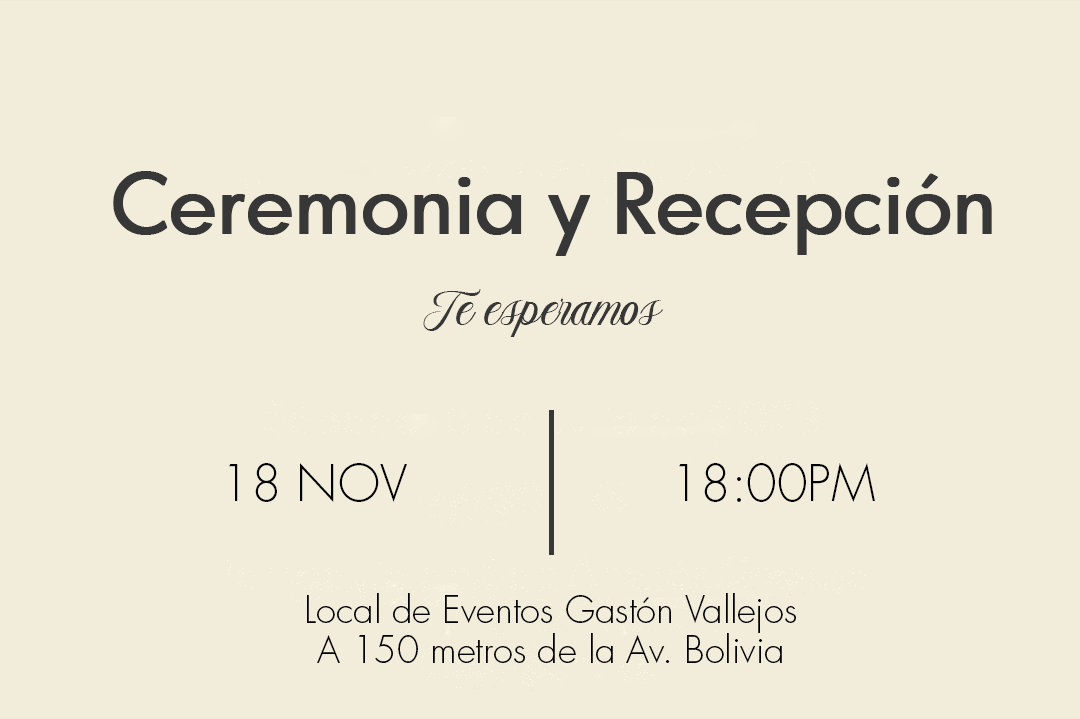
<style>
.page{position:relative;width:1080px;height:719px;background:#f2ecda}
.page>*{position:absolute;margin:0}
.t1{font:81.3px "GraphicusDT-Regular";color:#373737;font-weight:bold}
.t2{font:81.3px "GraphicusDT-Regular";color:#373737;font-variant:small-caps;font-weight:bold}
.t3{font:49.3px "Futura-Light";color:#000000}
.t4{font:36.3px/39.9px "Futura-Light";color:#000000}
</style>
<div class="page">
<p class="t1" style="left:113px;top:171px;width:879px;height:85px"><span class="t2">C</span>eremonia y Recepción</p>
<p class="t3" style="left:229px;top:463px;width:178px;height:39px">18 NOV</p>
<p class="t3" style="left:679px;top:463px;width:196px;height:39px">18:00PM</p>
<p class="t4" style="left:307px;top:593px;width:489px;height:70px;text-align:center">Local de Eventos Gastón Vallejos<br>A 150 metros de la Av. Bolivia</p>
</div>
